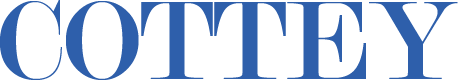
<style>
.page{position:relative;width:458px;height:80px;background:#ffffff}
.page>*{position:absolute;margin:0}
.t1{font:120px "Modern-Regular";color:#2e5fab}
</style>
<div class="page">
<p class="t1" style="left:0px;top:0px;width:458px;height:80px">COTTEY</p>
</div>
